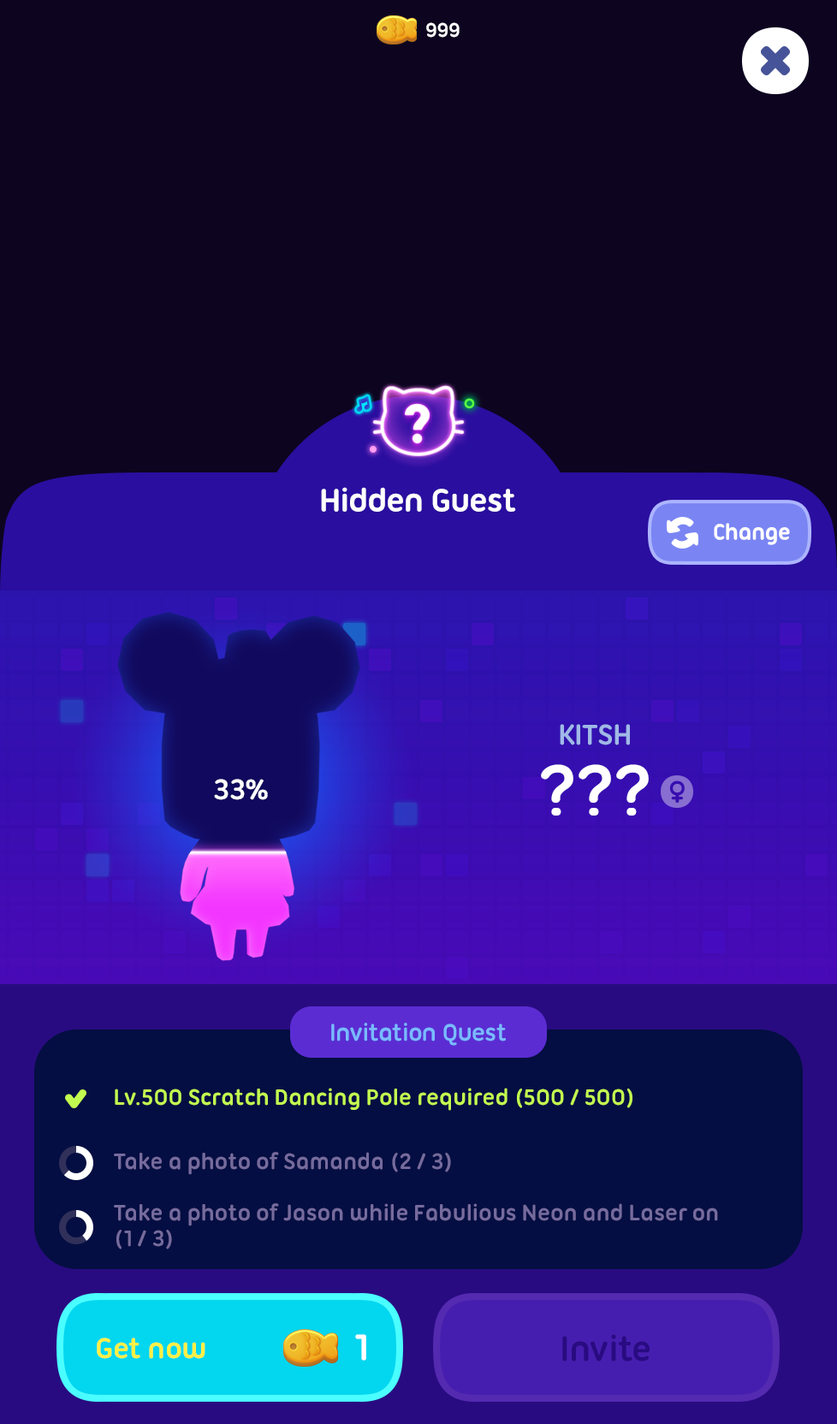
<style>
.page{position:relative;width:837px;height:1424px;background:#0d0420}
.page>*{position:absolute;margin:0}
.t1{font:21.4px "UbuntuTitling-Bold";letter-spacing:-0.025em;color:#ffffff}
.t2{font:34.2px "UbuntuTitling-Bold";letter-spacing:-0.025em;color:#ffffff}
.t3{font:24px "UbuntuTitling-Bold";letter-spacing:-0.025em;color:#ffffff}
.t4{font:30.8px "UbuntuTitling-Bold";letter-spacing:-0.025em;color:#a0b9e6;text-transform:uppercase}
.t5{font:77px "UbuntuTitling-Bold";letter-spacing:-0.025em;color:#ffffff}
.t6{font:30.8px "UbuntuTitling-Bold";letter-spacing:-0.025em;color:#ffffff;text-transform:uppercase}
.t7{font:25.7px "UbuntuTitling-Bold";letter-spacing:-0.025em;color:#79bbff}
.t8{font:24px "UbuntuTitling-Bold";letter-spacing:-0.025em;color:#c3fc50}
.t9{font:24px "UbuntuTitling-Bold";letter-spacing:-0.025em;color:#766b9d}
.t10{font:24px/25.7px "UbuntuTitling-Bold";letter-spacing:-0.025em;color:#766b9d}
.t11{font:30.8px "UbuntuTitling-Bold";letter-spacing:-0.025em;color:#fff045}
.t12{font:39.4px "UbuntuTitling-Bold";letter-spacing:-0.025em;color:#ffffff}
.t13{font:37.7px "UbuntuTitling-Bold";letter-spacing:-0.025em;color:#290b81}
</style>
<div class="page">
<p class="t1" style="left:426px;top:22px;width:34px;height:16px">999</p>
<p class="t2" style="left:321px;top:487px;width:195px;height:25px">Hidden Guest</p>
<p class="t3" style="left:714px;top:523px;width:76px;height:22px">Change</p>
<p class="t4" style="left:560px;top:724px;width:70px;height:22px">Kitsh</p>
<p class="t5" style="left:541px;top:764px;width:108px;height:52px">???</p>
<p class="t6" style="left:214px;top:779px;width:54px;height:21px">33%</p>
<p class="t7" style="left:331px;top:1023px;width:175px;height:23px">Invitation Quest</p>
<p class="t8" style="left:115px;top:1088px;width:518px;height:23px">Lv.500 Scratch Dancing Pole required (500 / 500)</p>
<p class="t9" style="left:114px;top:1152px;width:337px;height:23px">Take a photo of Samanda (2 / 3)</p>
<p class="t10" style="left:114px;top:1204px;width:604px;height:46px">Take a photo of Jason while Fabulious Neon and Laser on<br>(1 / 3)</p>
<p class="t11" style="left:97px;top:1338px;width:108px;height:21px">Get now</p>
<p class="t12" style="left:355px;top:1334px;width:11px;height:27px">1</p>
<p class="t13" style="left:562px;top:1334px;width:88px;height:28px">Invite</p>
</div>
